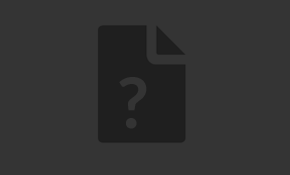
<style>
.page{position:relative;width:290px;height:175px;background:#343434}
.page>*{position:absolute;margin:0}
.t1{font:69.8px "Lato-Bold";color:#343434}
</style>
<div class="page">
<p class="t1" style="left:119px;top:77px;width:28px;height:52px">?</p>
<p class="t1" style="left:119px;top:77px;width:28px;height:52px">?</p>
</div>
